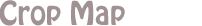
<style>
.page{position:relative;width:202px;height:26px;background:#ffffff}
.page>*{position:absolute;margin:0}
.t1{font:29.1px "HoboStd";color:#a09292}
</style>
<div class="page">
<p class="t1" style="left:0px;top:0px;width:125px;height:26px">Crop Map</p>
</div>
